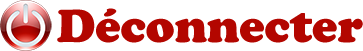
<style>
.page{position:relative;width:363px;height:51px;background:#ffffff}
.page>*{position:absolute;margin:0}
.t1{font:48px "CooperBlack";color:#b30600}
</style>
<div class="page">
<p class="t1" style="left:57px;top:8px;width:306px;height:35px">Déconnecter</p>
</div>
